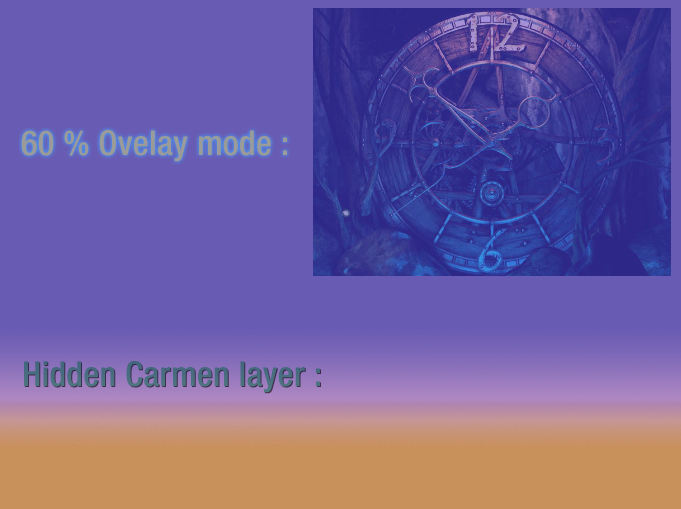
<style>
.page{position:relative;width:681px;height:509px;background:#685bb3}
.page>*{position:absolute;margin:0}
.t1{font:34.4px "HelveticaNeueLTStd-MdCn";letter-spacing:0.01em;color:#9b9b9a}
.t2{font:34.4px "HelveticaNeueLTStd-MdCn";letter-spacing:0.01em;color:#496e80}
</style>
<div class="page">
<p class="t1" style="left:21px;top:130px;width:266px;height:32px">60 % Ovelay mode :</p>
<p class="t2" style="left:24px;top:361px;width:296px;height:32px">Hidden Carmen layer :</p>
</div>
